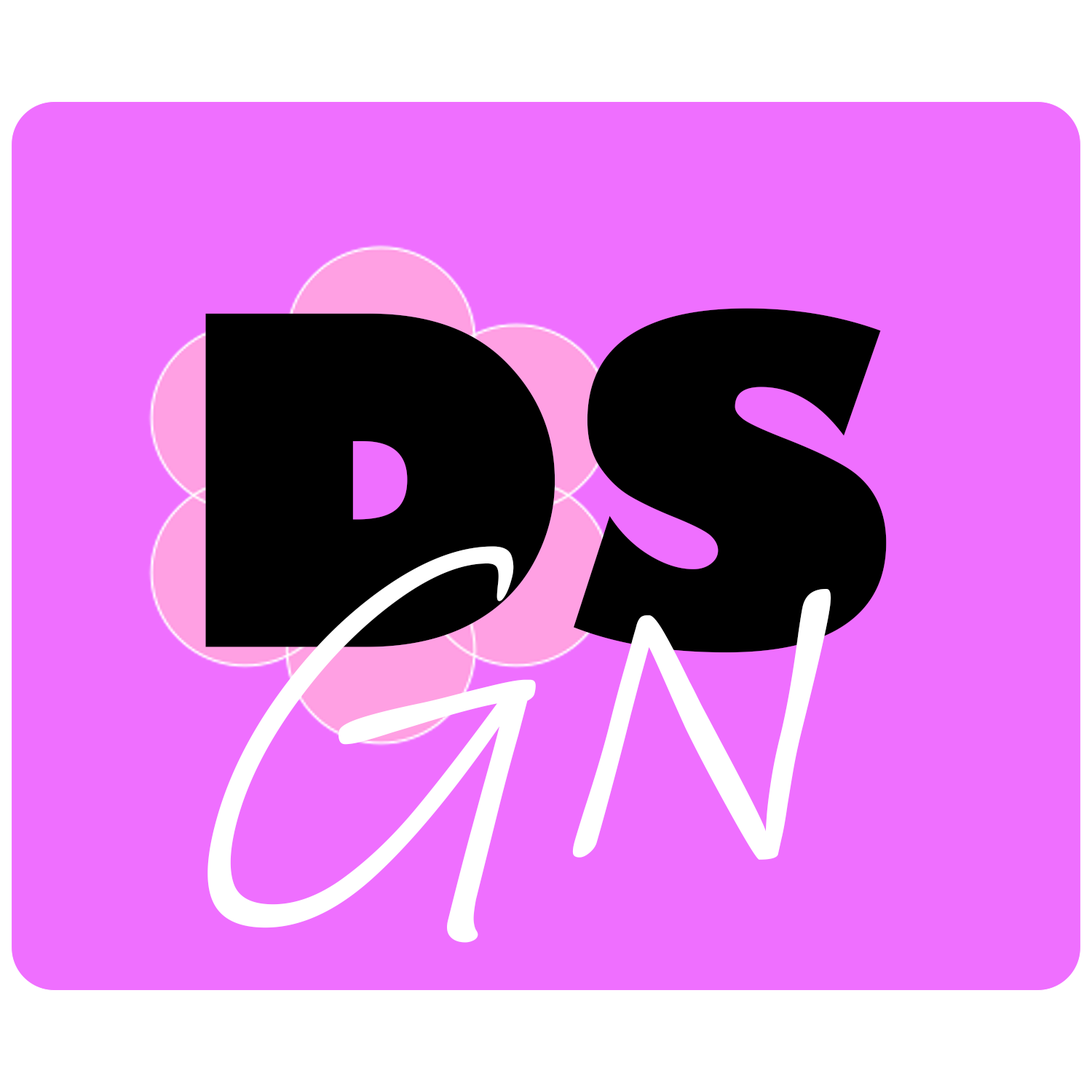
<style>
.page{position:relative;width:1092px;height:1092px;background:#ef6fff}
.page>*{position:absolute;margin:0}
.t1{font:447.3px "GillSans-UltraBold";color:#000000}
.t2{font:447.3px "InkFree-Italic";color:#ffffff}
</style>
<div class="page">
<p class="t1" style="left:205px;top:308px;width:682px;height:345px">DS</p>
<p class="t2" style="left:207px;top:546px;width:625px;height:397px">GN</p>
</div>
